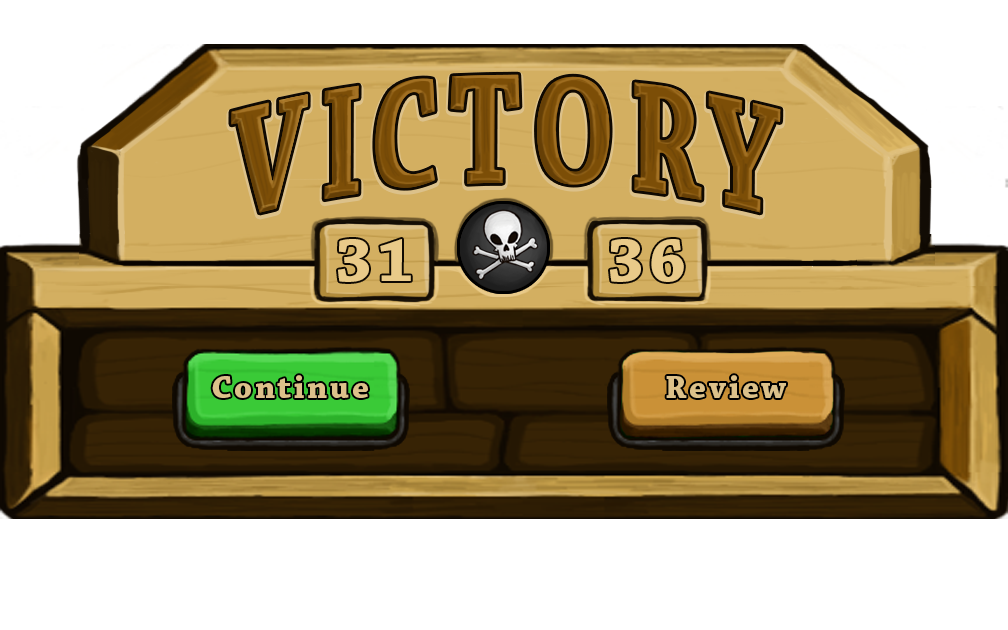
<style>
.page{position:relative;width:1008px;height:630px;background:#ffffff}
.page>*{position:absolute;margin:0}
.t1{font:163.3px "ChaparralPro-Bold";letter-spacing:0.08em;color:#7c4e07;scale:0.71 1}
.t2{font:65.5px "ChaparralPro-Bold";letter-spacing:0.08em;color:#e9ca89}
.t3{font:33.2px "ChaparralPro-Bold";letter-spacing:0.08em;color:#dcc18a}
</style>
<div class="page">
<p class="t1" style="left:231px;top:74px;width:550px;height:139px">VICTORY</p>
<p class="t2" style="left:338px;top:239px;width:73px;height:43px">31</p>
<p class="t2" style="left:610px;top:239px;width:74px;height:43px">36</p>
<p class="t3" style="left:212px;top:375px;width:156px;height:23px">Continue</p>
<p class="t3" style="left:666px;top:375px;width:120px;height:23px">Review</p>
</div>
